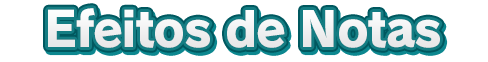
<style>
.page{position:relative;width:488px;height:62px;background:#ffffff}
.page>*{position:absolute;margin:0}
.t1{font:48px "RodinPro-EB";letter-spacing:-0.031em;color:#f0f0f1}
</style>
<div class="page">
<p class="t1" style="left:48px;top:8px;width:392px;height:40px">Efeitos de Notas</p>
</div>
